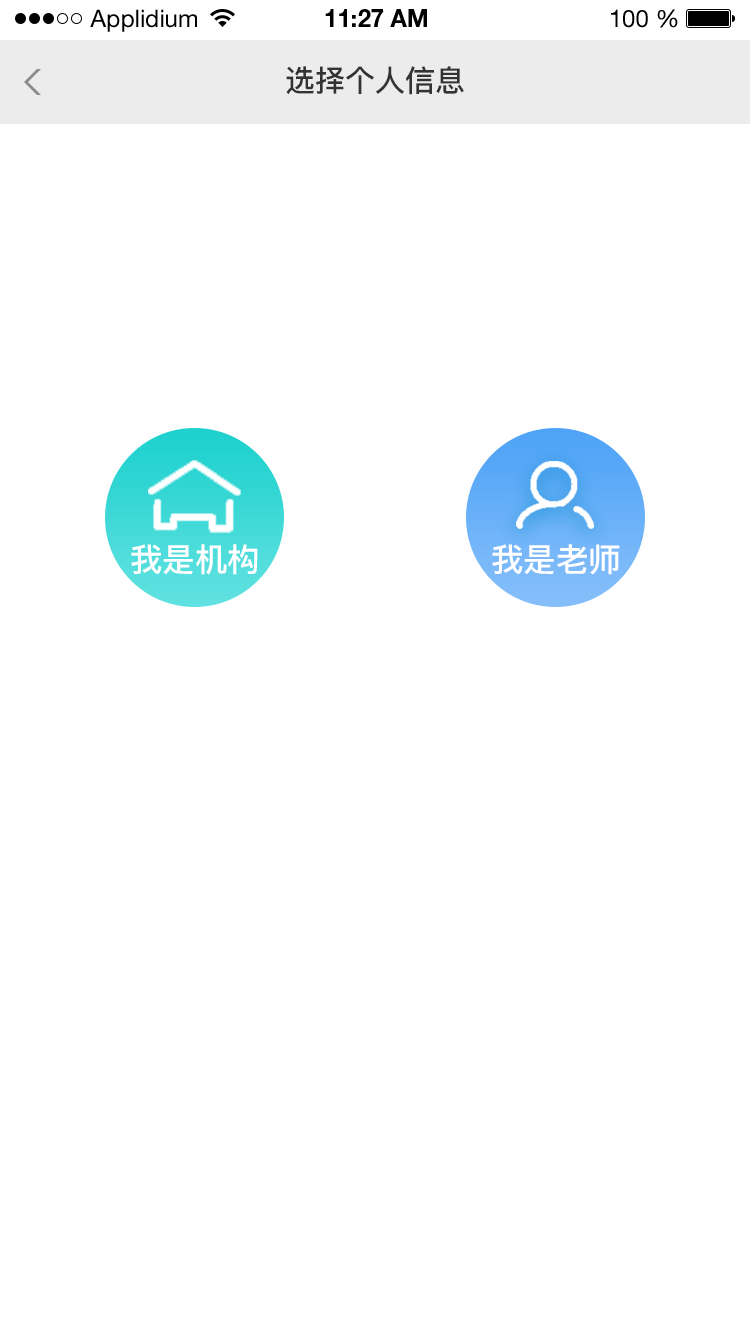
<style>
.page{position:relative;width:750px;height:1334px;background:#ffffff}
.page>*{position:absolute;margin:0}
.t1{font:24px "HelveticaNeueLTStd-Roman";color:#000000}
.t2{font:24px "HelveticaNeueLTStd-Bd";color:#000000}
.t3{font:30px "PingFang-SC-Bold";color:#333333}
.t4{font:32.5px "PingFang-SC-Bold";color:#ffffff}
</style>
<div class="page">
<p class="t1" style="left:90px;top:9px;width:107px;height:23px">Applidium</p>
<p class="t2" style="left:325px;top:9px;width:102px;height:18px">11:27 AM</p>
<p class="t1" style="left:611px;top:9px;width:67px;height:19px">100 %</p>
<p class="t3" style="left:286px;top:66px;width:178px;height:29px">选择个人信息</p>
<p class="t4" style="left:131px;top:544px;width:127px;height:31px">我是机构</p>
<p class="t4" style="left:492px;top:544px;width:128px;height:31px">我是老师</p>
</div>
